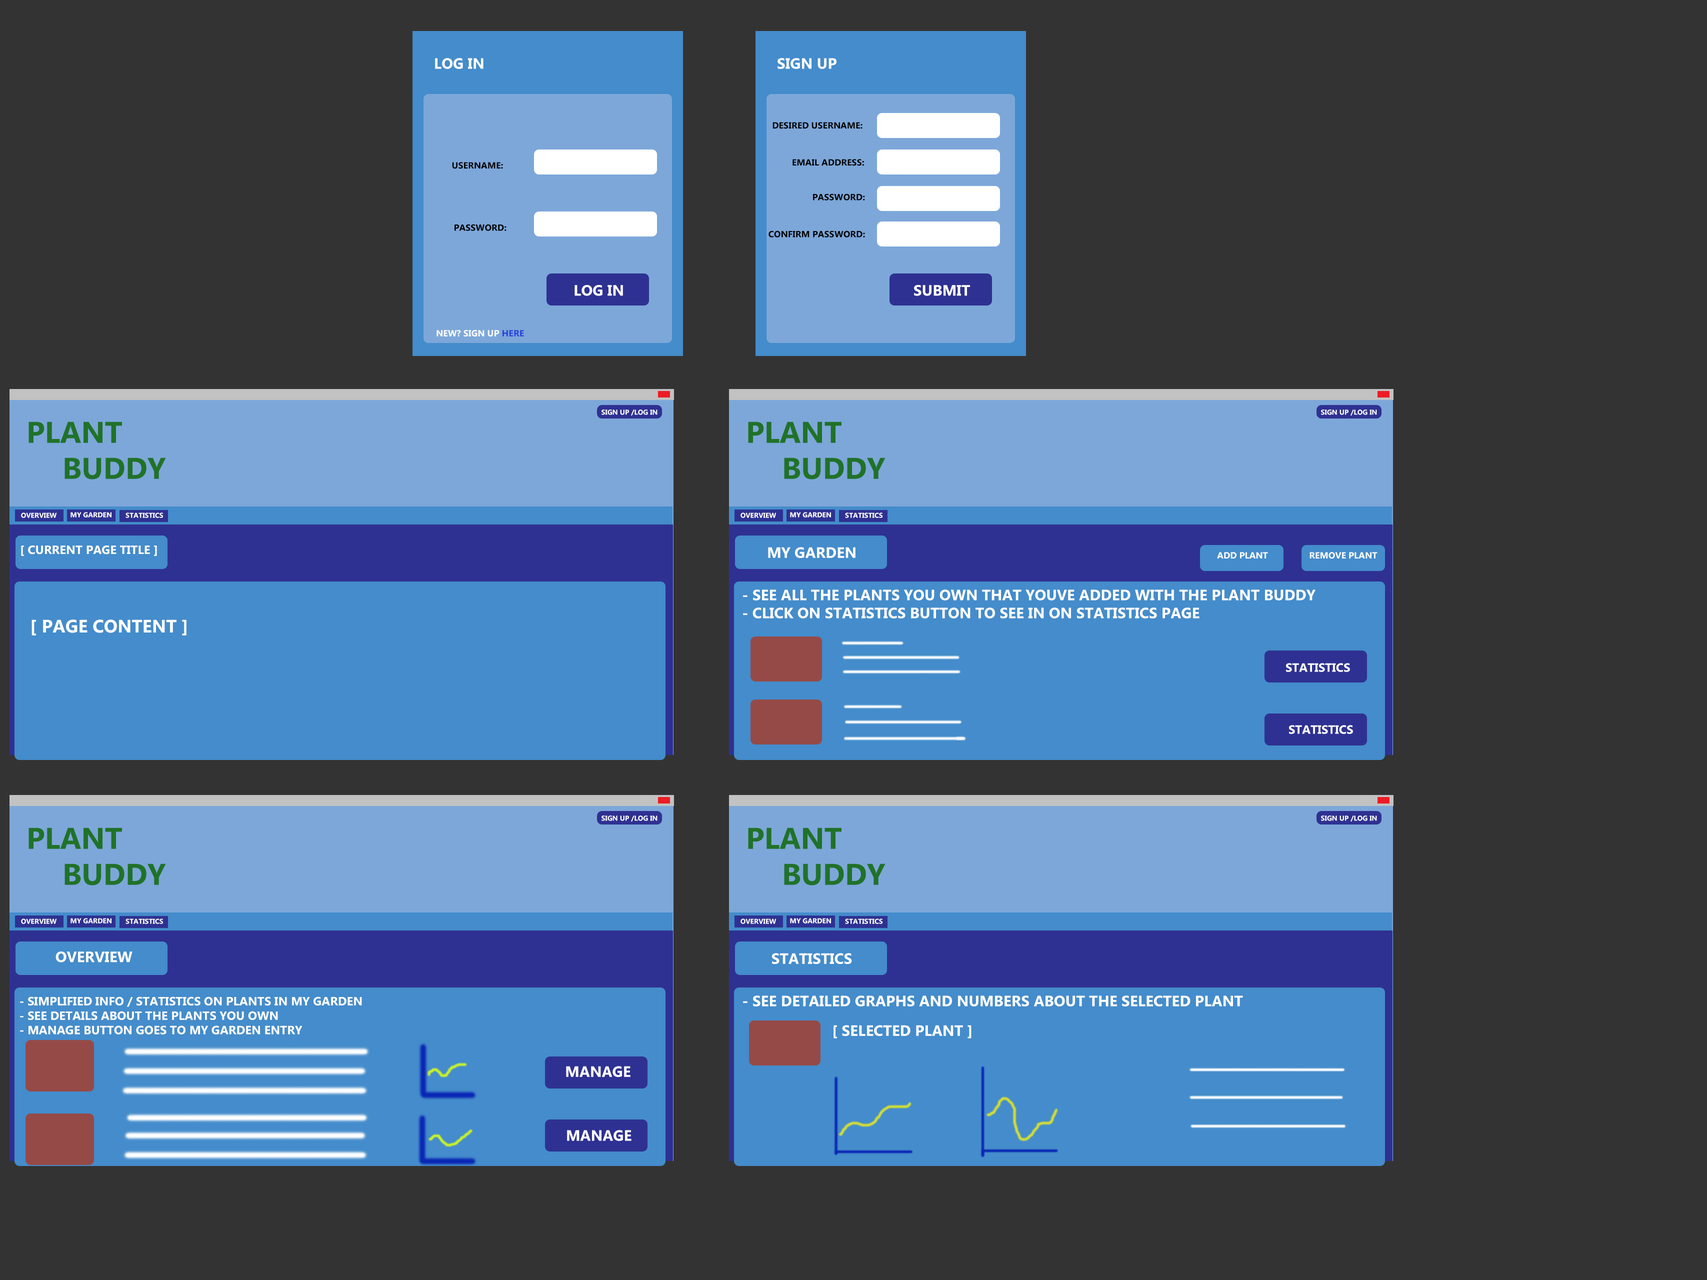
<style>
.page{position:relative;width:1707px;height:1280px;background:#333333}
.page>*{position:absolute;margin:0}
.t1{font:15px "MyanmarText-Bold";color:#ffffff}
.t2{font:9px "MyanmarText-Bold";color:#000000}
.t3{font:9px "MyanmarText-Bold";color:#ffffff}
.t4{font:9px "MyanmarText-Bold";color:#253fd9}
.t5{font:7px "MyanmarText-Bold";color:#ffffff}
.t6{font:30px "MyanmarText-Bold";color:#207228}
.t7{font:12px "MyanmarText-Bold";color:#ffffff}
.t8{font:18px "MyanmarText-Bold";color:#ffffff}
</style>
<div class="page">
<p class="t1" style="left:435px;top:58px;width:49px;height:11px">LOG IN</p>
<p class="t1" style="left:778px;top:58px;width:58px;height:11px">SIGN UP</p>
<p class="t2" style="left:772px;top:122px;width:90px;height:7px">DESIRED USERNAME:</p>
<p class="t2" style="left:792px;top:159px;width:72px;height:7px">EMAIL ADDRESS:</p>
<p class="t2" style="left:452px;top:162px;width:51px;height:7px">USERNAME:</p>
<p class="t2" style="left:813px;top:194px;width:52px;height:6px">PASSWORD:</p>
<p class="t2" style="left:454px;top:224px;width:52px;height:7px">PASSWORD:</p>
<p class="t2" style="left:768px;top:230px;width:97px;height:8px">CONFIRM PASSWORD:</p>
<p class="t1" style="left:574px;top:285px;width:49px;height:11px">LOG IN</p>
<p class="t1" style="left:914px;top:285px;width:56px;height:11px">SUBMIT</p>
<p class="t3" style="left:436px;top:330px;width:88px;height:6px">NEW? SIGN UP <span class="t4">HERE</span></p>
<p class="t5" style="left:602px;top:410px;width:56px;height:6px">SIGN UP /LOG IN</p>
<p class="t5" style="left:1321px;top:410px;width:56px;height:6px">SIGN UP /LOG IN</p>
<p class="t6" style="left:28px;top:422px;width:138px;height:58px">PLANT <br>  BUDDY</p>
<p class="t6" style="left:748px;top:422px;width:138px;height:58px">PLANT <br>  BUDDY</p>
<p class="t5" style="left:21px;top:512px;width:36px;height:6px">OVERVIEW</p>
<p class="t5" style="left:70px;top:512px;width:42px;height:6px">MY GARDEN</p>
<p class="t5" style="left:126px;top:512px;width:37px;height:6px">STATISTICS</p>
<p class="t5" style="left:740px;top:512px;width:36px;height:6px">OVERVIEW</p>
<p class="t5" style="left:790px;top:512px;width:41px;height:6px">MY GARDEN</p>
<p class="t5" style="left:845px;top:512px;width:37px;height:6px">STATISTICS</p>
<p class="t7" style="left:21px;top:546px;width:136px;height:10px">[ CURRENT PAGE TITLE ]</p>
<p class="t1" style="left:768px;top:547px;width:88px;height:11px">MY GARDEN</p>
<p class="t3" style="left:1217px;top:552px;width:51px;height:6px">ADD PLANT</p>
<p class="t3" style="left:1310px;top:552px;width:68px;height:7px">REMOVE PLANT</p>
<p class="t1" style="left:743px;top:590px;width:573px;height:28px">- SEE ALL THE PLANTS YOU OWN THAT YOUVE ADDED WITH THE PLANT BUDDY<br>- CLICK ON STATISTICS BUTTON TO SEE IN ON STATISTICS PAGE</p>
<p class="t8" style="left:32px;top:620px;width:154px;height:16px">[ PAGE CONTENT ]</p>
<p class="t7" style="left:1286px;top:663px;width:64px;height:9px">STATISTICS</p>
<p class="t7" style="left:1289px;top:725px;width:64px;height:9px">STATISTICS</p>
<p class="t5" style="left:602px;top:816px;width:56px;height:6px">SIGN UP /LOG IN</p>
<p class="t5" style="left:1321px;top:816px;width:56px;height:6px">SIGN UP /LOG IN</p>
<p class="t6" style="left:28px;top:828px;width:138px;height:58px">PLANT <br>  BUDDY</p>
<p class="t6" style="left:748px;top:828px;width:138px;height:58px">PLANT <br>  BUDDY</p>
<p class="t5" style="left:70px;top:918px;width:42px;height:6px">MY GARDEN</p>
<p class="t5" style="left:790px;top:918px;width:41px;height:6px">MY GARDEN</p>
<p class="t5" style="left:21px;top:918px;width:36px;height:6px">OVERVIEW</p>
<p class="t5" style="left:126px;top:918px;width:37px;height:6px">STATISTICS</p>
<p class="t5" style="left:740px;top:918px;width:36px;height:6px">OVERVIEW</p>
<p class="t5" style="left:845px;top:918px;width:37px;height:6px">STATISTICS</p>
<p class="t1" style="left:56px;top:952px;width:76px;height:10px">OVERVIEW</p>
<p class="t1" style="left:772px;top:953px;width:80px;height:11px">STATISTICS</p>
<p class="t7" style="left:20px;top:996px;width:342px;height:38px">- SIMPLIFIED INFO / STATISTICS ON PLANTS IN MY GARDEN<br>- SEE DETAILS ABOUT THE PLANTS YOU OWN<br>- MANAGE BUTTON GOES TO MY GARDEN ENTRY</p>
<p class="t1" style="left:743px;top:996px;width:500px;height:10px">- SEE DETAILED GRAPHS AND NUMBERS ABOUT THE SELECTED PLANT</p>
<p class="t1" style="left:834px;top:1025px;width:138px;height:13px">[ SELECTED PLANT ]</p>
<p class="t1" style="left:566px;top:1066px;width:64px;height:11px">MANAGE</p>
<p class="t1" style="left:567px;top:1130px;width:65px;height:11px">MANAGE</p>
</div>
